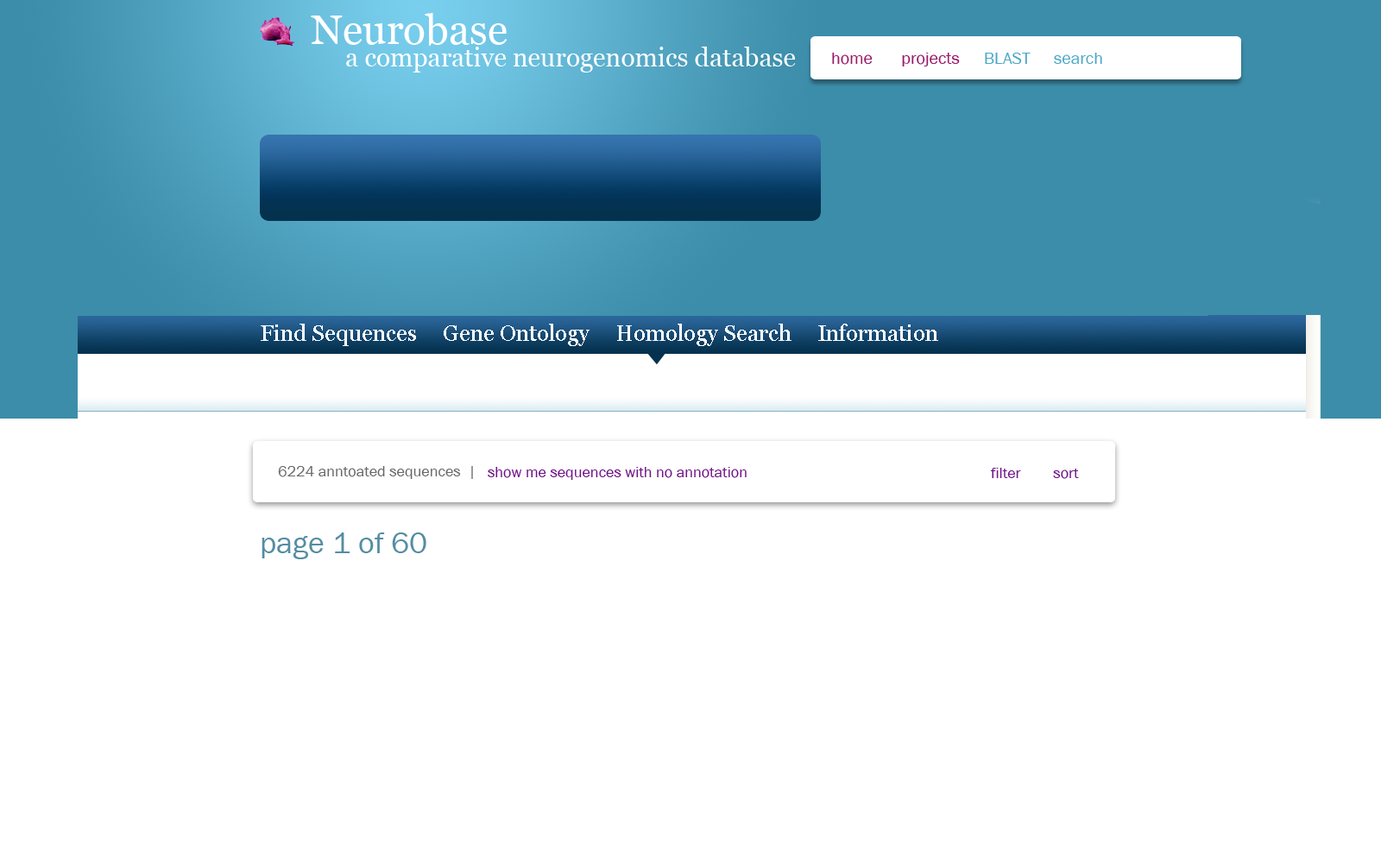
<style>
.page{position:relative;width:1381px;height:863px;background:#ffffff}
.page>*{position:absolute;margin:0}
.t1{font:41.4px "Georgia";color:#ffffff}
.t2{font:25.9px "Georgia";color:#ffffff}
.t3{font:17.3px "FranklinGothic-Book";color:#971b6a}
.t4{font:17.3px "FranklinGothic-Book";color:#4da8c8}
.t5{font:15.5px "FranklinGothic-Book";color:#686868}
.t6{font:15.5px "FranklinGothic-Book";color:#701387}
.t7{font:31.1px "FranklinGothic-Book";color:#548da3}
</style>
<div class="page">
<p class="t1" style="left:311px;top:13px;width:197px;height:33px">Neurobase</p>
<p class="t2" style="left:346px;top:47px;width:450px;height:26px">a comparative neurogenomics database</p>
<p class="t3" style="left:832px;top:53px;width:41px;height:12px">home</p>
<p class="t3" style="left:902px;top:53px;width:58px;height:13px">projects</p>
<p class="t4" style="left:985px;top:53px;width:46px;height:11px">BLAST</p>
<p class="t4" style="left:1054px;top:53px;width:48px;height:11px">search</p>
<p class="t5" style="left:278px;top:466px;width:195px;height:13px">6224 anntoated sequences  |</p>
<p class="t6" style="left:488px;top:467px;width:259px;height:13px">show me sequences with no annotation</p>
<p class="t6" style="left:990px;top:468px;width:31px;height:10px">filter</p>
<p class="t6" style="left:1053px;top:469px;width:26px;height:10px">sort</p>
<p class="t7" style="left:262px;top:533px;width:164px;height:26px">page 1 of 60</p>
</div>
